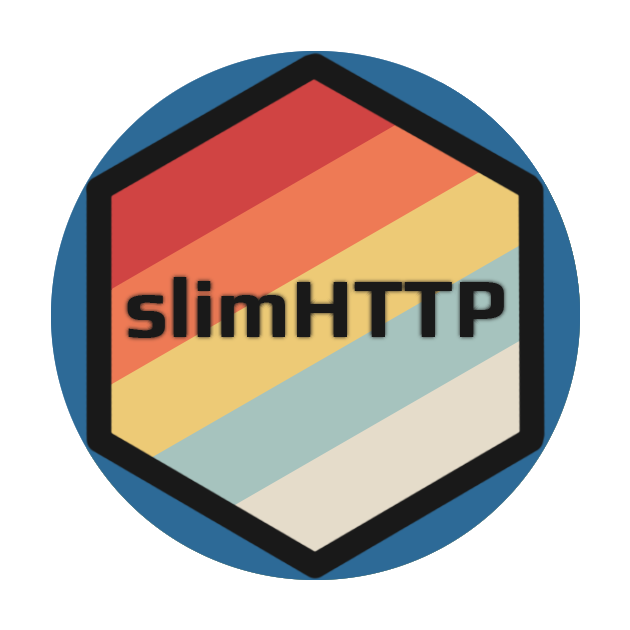
<style>
.page{position:relative;width:630px;height:630px;background:#ffffff}
.page>*{position:absolute;margin:0}
.t1{font:85px "Play-Bold";color:#191919}
</style>
<div class="page">
<p class="t1" style="left:127px;top:277px;width:377px;height:61px">slimHTTP</p>
</div>
